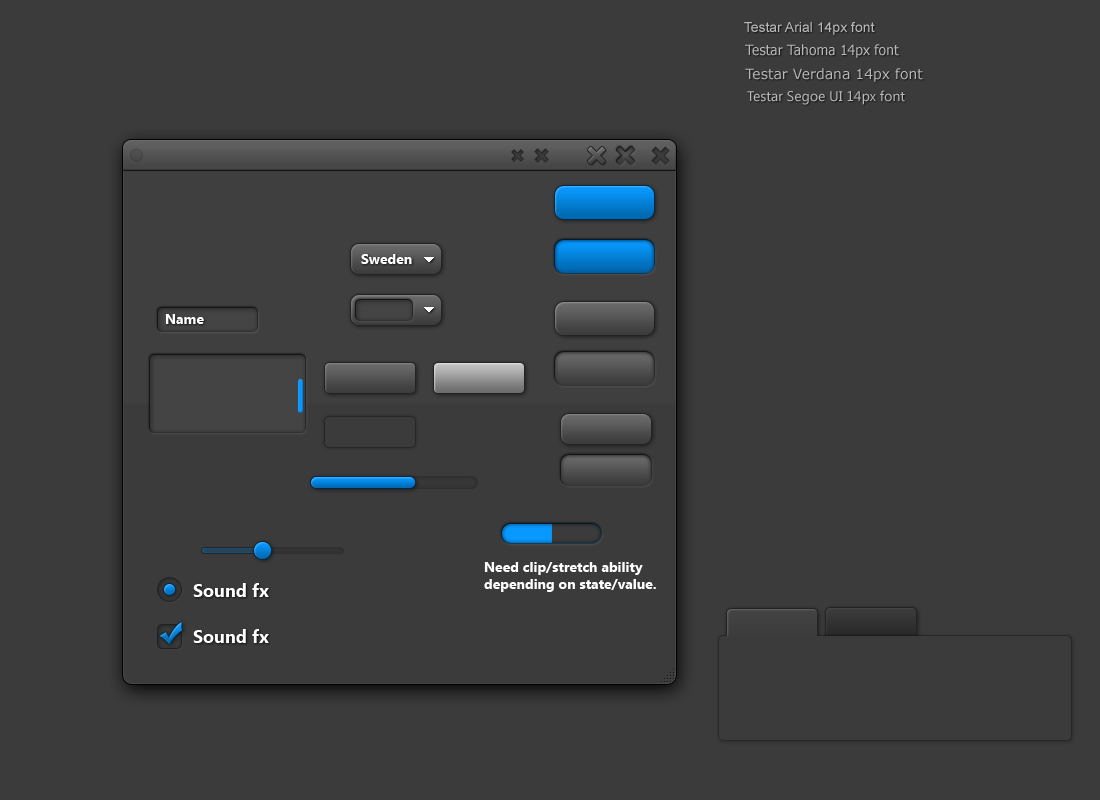
<style>
.page{position:relative;width:1100px;height:800px;background:#3b3b3b}
.page>*{position:absolute;margin:0}
.t1{font:14px "ArialMT";color:#b8b8b8}
.t2{font:14px "Tahoma";color:#b8b8b8}
.t3{font:14px "Verdana";color:#b8b8b8}
.t4{font:14px "SegoeUI";color:#b8b8b8}
.t5{font:14px "SegoeUI-Bold";color:#ffffff}
.t6{font:18px "SegoeUI-Bold";color:#ffffff}
</style>
<div class="page">
<p class="t1" style="left:744px;top:22px;width:131px;height:13px">Testar Arial 14px font</p>
<p class="t2" style="left:745px;top:44px;width:154px;height:14px">Testar Tahoma 14px font</p>
<p class="t3" style="left:745px;top:68px;width:178px;height:14px">Testar Verdana 14px font</p>
<p class="t4" style="left:747px;top:90px;width:158px;height:15px">Testar Segoe UI 14px font</p>
<p class="t5" style="left:361px;top:254px;width:51px;height:10px">Sweden</p>
<p class="t5" style="left:165px;top:314px;width:39px;height:10px">Name</p>
<p class="t5" style="left:484px;top:562px;width:172px;height:30px">Need clip/stretch ability<br>depending on state/value.</p>
<p class="t6" style="left:193px;top:583px;width:76px;height:14px">Sound fx</p>
<p class="t6" style="left:193px;top:629px;width:76px;height:14px">Sound fx</p>
</div>
